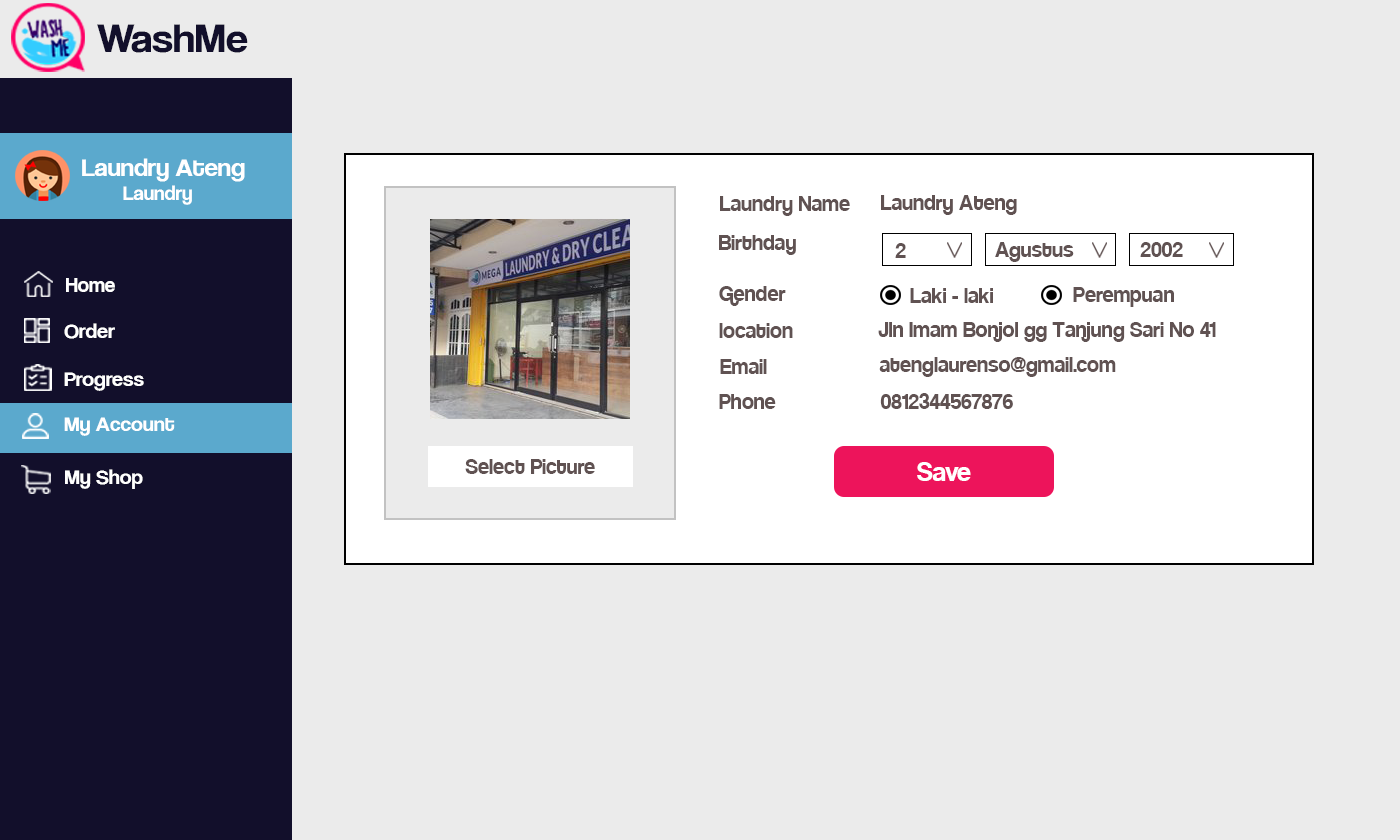
<style>
.page{position:relative;width:1400px;height:840px;background:#ebebeb}
.page>*{position:absolute;margin:0}
.t1{font:42.1px "CoolveticaRg-Regular";color:#120f2b;scale:1.05 1}
.t2{font:25.2px "CoolveticaRg-Regular";color:#ffffff;scale:1.05 1}
.t3{font:20px "CoolveticaRg-Regular";color:#ffffff;scale:1.05 1}
.t4{font:24px "Coolvetica-Regular";color:#605252}
.t5{font:21px "CoolveticaRg-Regular";color:#ffffff}
.t6{font:21px "CoolveticaRg-Regular";color:#ffffff;scale:1.05 1}
.t7{font:30px "Coolvetica-Regular";color:#ffffff}
</style>
<div class="page">
<p class="t1" style="left:97px;top:24px;width:151px;height:29px">WashMe</p>
<p class="t2" style="left:82px;top:158px;width:163px;height:47px">Laundry Ateng<br><span class="t3">        Laundry</span></p>
<p class="t4" style="left:720px;top:196px;width:130px;height:20px">Laundry Name</p>
<p class="t4" style="left:881px;top:195px;width:136px;height:20px">Laundry Ateng</p>
<p class="t4" style="left:719px;top:235px;width:77px;height:20px">Birthday</p>
<p class="t4" style="left:895px;top:243px;width:11px;height:15px">2</p>
<p class="t4" style="left:995px;top:242px;width:79px;height:20px">Agustus</p>
<p class="t4" style="left:1140px;top:242px;width:43px;height:15px">2002</p>
<p class="t5" style="left:66px;top:278px;width:49px;height:14px">Home</p>
<p class="t4" style="left:719px;top:286px;width:67px;height:20px">Gender</p>
<p class="t4" style="left:910px;top:288px;width:83px;height:15px">Laki - laki</p>
<p class="t4" style="left:1073px;top:287px;width:101px;height:20px">Perempuan</p>
<p class="t6" style="left:64px;top:323px;width:51px;height:16px">Order</p>
<p class="t4" style="left:719px;top:323px;width:74px;height:15px">location</p>
<p class="t4" style="left:878px;top:322px;width:338px;height:20px">Jln Imam Bonjol gg Tanjung Sari No 41</p>
<p class="t4" style="left:720px;top:359px;width:47px;height:15px">Email</p>
<p class="t4" style="left:879px;top:357px;width:237px;height:20px">atenglaurenso@gmail.com</p>
<p class="t6" style="left:64px;top:372px;width:80px;height:19px">Progress</p>
<p class="t4" style="left:719px;top:394px;width:57px;height:15px">Phone</p>
<p class="t4" style="left:880px;top:393px;width:133px;height:16px">0812344567876</p>
<p class="t6" style="left:64px;top:417px;width:111px;height:19px">My Account</p>
<p class="t4" style="left:465px;top:459px;width:130px;height:15px">Select Picture</p>
<p class="t7" style="left:917px;top:462px;width:54px;height:19px">Save</p>
<p class="t6" style="left:65px;top:469px;width:78px;height:20px">My Shop</p>
</div>
